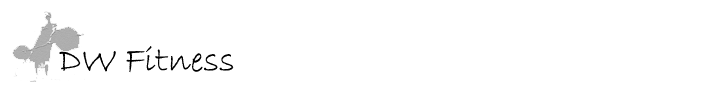
<style>
.page{position:relative;width:728px;height:90px;background:#ffffff}
.page>*{position:absolute;margin:0}
.t1{font:36px "BradleyHandITC";color:#000000}
</style>
<div class="page">
<p class="t1" style="left:59px;top:46px;width:175px;height:27px">DW Fitness</p>
</div>
